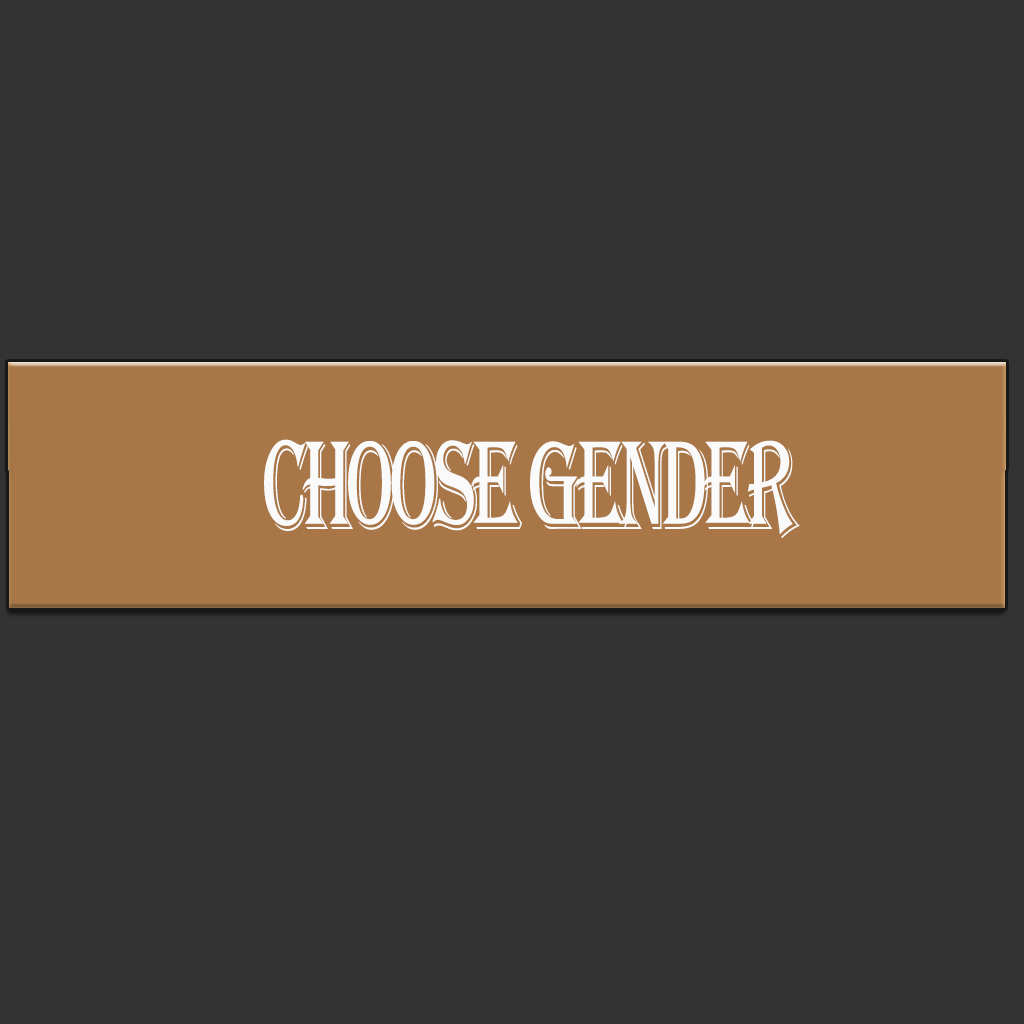
<style>
.page{position:relative;width:1024px;height:1024px;background:#333333}
.page>*{position:absolute;margin:0}
.t1{font:130.4px "Algerian";letter-spacing:-0.08em;color:#fafafa;scale:0.61 1}
</style>
<div class="page">
<p class="t1" style="left:264px;top:439px;width:536px;height:99px">CHOOSE GENDER</p>
</div>
